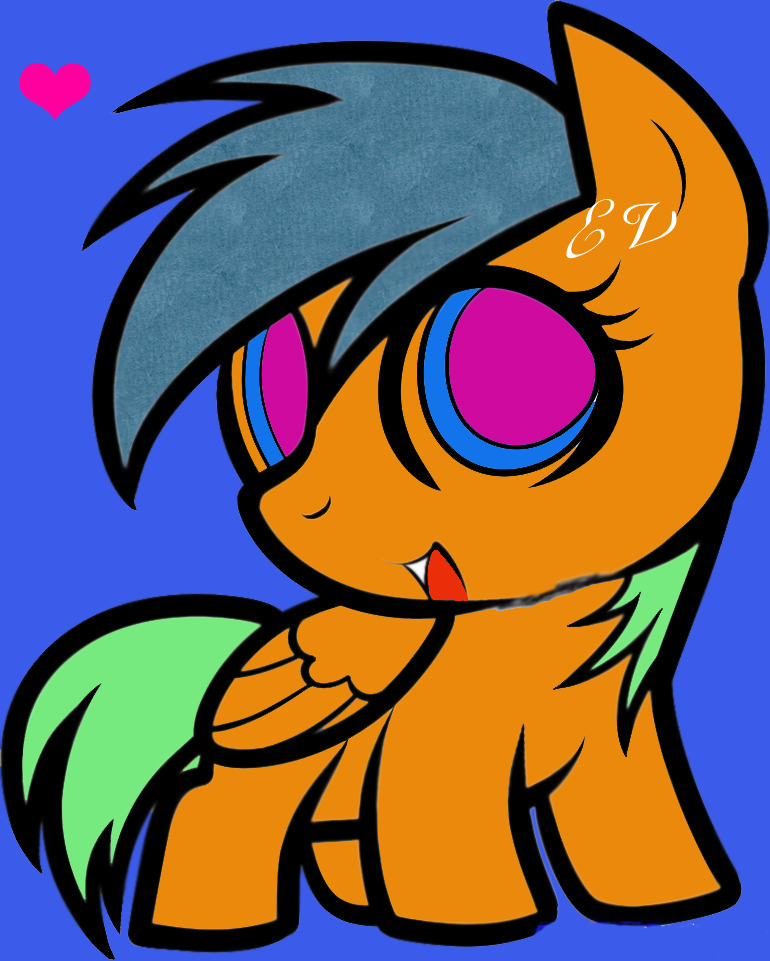
<style>
.page{position:relative;width:770px;height:961px;background:#ea890b}
.page>*{position:absolute;margin:0}
.t1{font:72px "SnellRoundhand";color:#ffffff}
</style>
<div class="page">
<p class="t1" style="left:566px;top:199px;width:111px;height:60px">EV</p>
</div>
